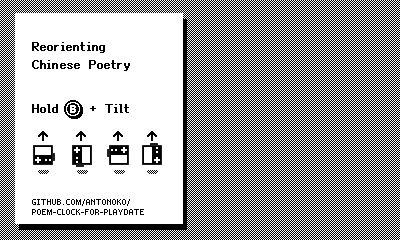
<style>
.page{position:relative;width:400px;height:240px;background:#ffffff}
.page>*{position:absolute;margin:0}
.t1{font:12px/18px "Fusion-Pixel-12px-Proportional-zh_hans-Regular";letter-spacing:0.075em;color:#000000;font-weight:bold}
.t2{font:12px "Fusion-Pixel-12px-Proportional-zh_hans-Regular";letter-spacing:0.05em;color:#000000;font-weight:bold}
.t3{font:8px/10px "Fusion-Pixel-8px-Proportional-zh_hans-Regular";color:#000000;text-transform:uppercase}
</style>
<div class="page">
<p class="t1" style="left:32px;top:42px;width:98px;height:29px">Reorienting <br>Chinese Poetry</p>
<p class="t2" style="left:32px;top:104px;width:26px;height:9px">Hold</p>
<p class="t2" style="left:90px;top:106px;width:6px;height:5px">+</p>
<p class="t2" style="left:105px;top:104px;width:24px;height:9px">Tilt</p>
<p class="t3" style="left:32px;top:199px;width:112px;height:16px">github.com/Antonoko/<br>poem-clock-for-playdate</p>
</div>
